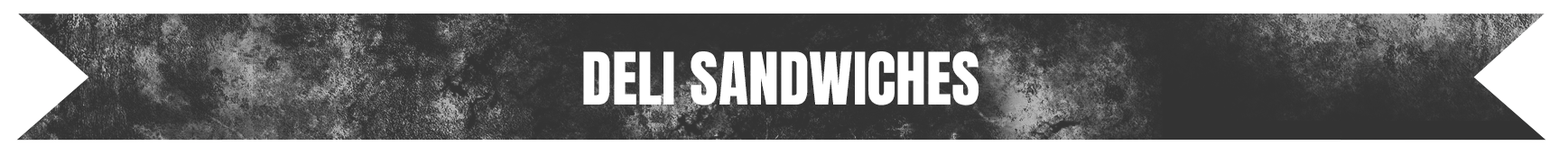
<style>
.page{position:relative;width:1568px;height:155px;background:#ffffff}
.page>*{position:absolute;margin:0}
.t1{font:61.4px "Anton-Regular";color:#ffffff}
</style>
<div class="page">
<p class="t1" style="left:583px;top:51px;width:396px;height:55px">DELI SANDWICHES</p>
</div>
